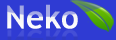
<style>
.page{position:relative;width:116px;height:40px;background:#2f3bd3}
.page>*{position:absolute;margin:0}
.t1{font:31.5px "TrebuchetMS";font-weight:bold}
</style>
<div class="page">
<p class="t1" style="left:7px;top:4px;width:71px;height:25px">Neko</p>
</div>
